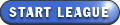
<style>
.page{position:relative;width:120px;height:25px}
.page>*{position:absolute;margin:0}
.t1{font:14px "FranklinGothic-Condensed";letter-spacing:0.1em;color:#ffffff}
</style>
<div class="page">
<p class="t1" style="left:9px;top:7px;width:100px;height:10px">START LEAGUE</p>
</div>
